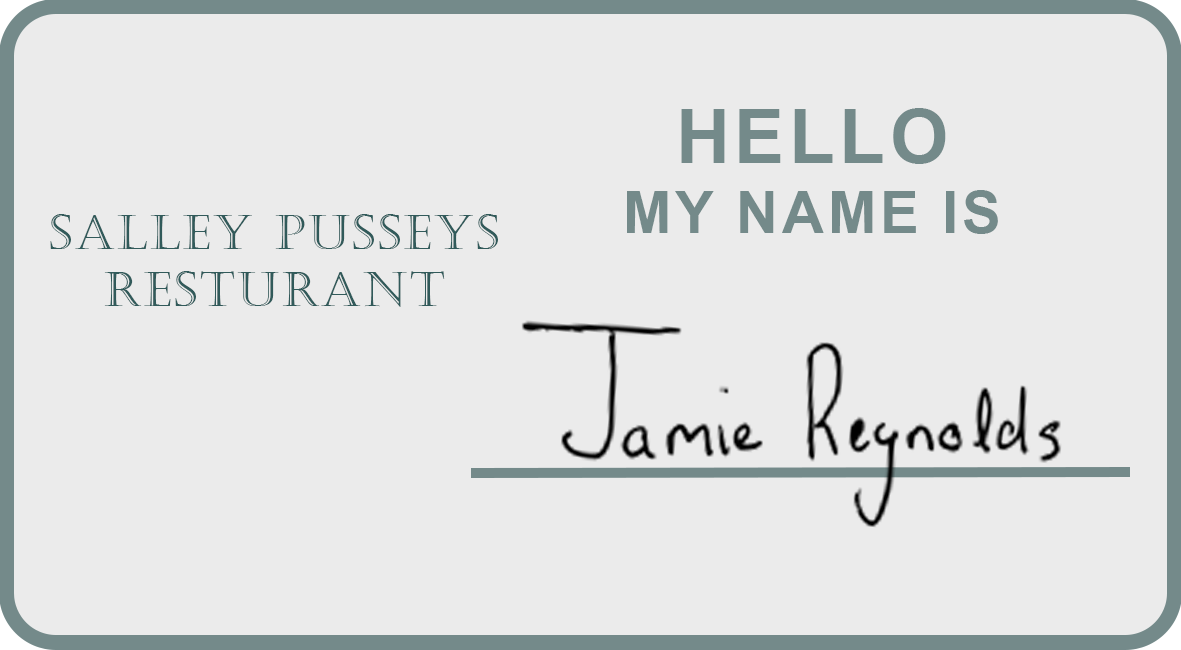
<style>
.page{position:relative;width:1181px;height:650px;background:#ebebeb}
.page>*{position:absolute;margin:0}
.t1{font:58.3px "Arial-BoldMT";letter-spacing:0.06em;color:#748a8a}
.t2{font:75px "Arial-BoldMT";letter-spacing:0.06em;color:#748a8a}
.t3{font:47.9px "Castellar";letter-spacing:0.06em;color:#315a5a}
</style>
<div class="page">
<p class="t1" style="left:627px;top:108px;width:371px;height:126px;text-align:center"><span class="t2">HELLO<br></span>MY NAME IS</p>
<p class="t3" style="left:50px;top:214px;width:448px;height:93px;text-align:center">SALLEY PUSSEYS<br>RESTURANT</p>
</div>
